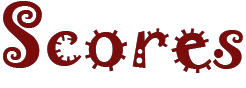
<style>
.page{position:relative;width:246px;height:88px;background:#ffffff}
.page>*{position:absolute;margin:0}
.t1{font:75px "Jokerman-Regular";color:#7b0c0c}
</style>
<div class="page">
<p class="t1" style="left:3px;top:1px;width:240px;height:72px">Scores</p>
<p class="t1" style="left:3px;top:1px;width:240px;height:72px">Scores</p>
</div>
